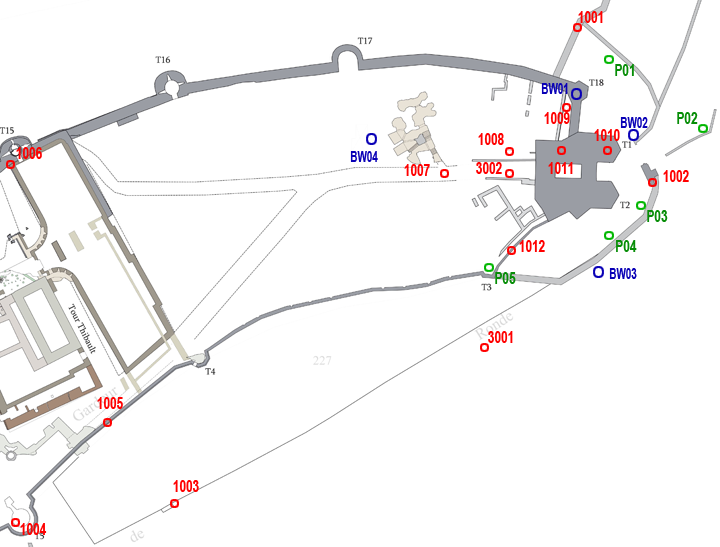
<style>
.page{position:relative;width:720px;height:547px;background:#ffffff}
.page>*{position:absolute;margin:0}
.t1{font:17.5px "Arial-BoldMT";color:#ff0000;scale:0.68 1}
.t2{font:17.5px "Arial-BoldMT";color:#068d06;scale:0.68 1}
.t3{font:14.6px "Arial-BoldMT";color:#0900b6;scale:0.68 1}
</style>
<div class="page">
<p class="t1" style="left:578px;top:11px;width:25px;height:12px">1001</p>
<p class="t2" style="left:615px;top:64px;width:19px;height:12px">P01</p>
<p class="t3" style="left:541px;top:83px;width:27px;height:11px">BW01</p>
<p class="t1" style="left:544px;top:112px;width:26px;height:12px">1009</p>
<p class="t2" style="left:677px;top:112px;width:21px;height:12px">P02</p>
<p class="t3" style="left:620px;top:117px;width:28px;height:11px">BW02</p>
<p class="t1" style="left:478px;top:133px;width:26px;height:12px">1008</p>
<p class="t1" style="left:594px;top:129px;width:26px;height:12px">1010</p>
<p class="t1" style="left:16px;top:147px;width:26px;height:12px">1006</p>
<p class="t3" style="left:350px;top:151px;width:28px;height:11px">BW04</p>
<p class="t1" style="left:404px;top:164px;width:26px;height:12px">1007</p>
<p class="t1" style="left:476px;top:162px;width:26px;height:12px">3002</p>
<p class="t1" style="left:548px;top:162px;width:25px;height:12px">1011</p>
<p class="t1" style="left:663px;top:170px;width:26px;height:12px">1002</p>
<p class="t2" style="left:647px;top:210px;width:21px;height:12px">P03</p>
<p class="t1" style="left:519px;top:240px;width:26px;height:12px">1012</p>
<p class="t2" style="left:616px;top:240px;width:21px;height:12px">P04</p>
<p class="t3" style="left:609px;top:268px;width:28px;height:11px">BW03</p>
<p class="t2" style="left:495px;top:272px;width:21px;height:12px">P05</p>
<p class="t1" style="left:488px;top:331px;width:25px;height:12px">3001</p>
<p class="t1" style="left:97px;top:397px;width:26px;height:12px">1005</p>
<p class="t1" style="left:173px;top:480px;width:26px;height:12px">1003</p>
<p class="t1" style="left:20px;top:523px;width:27px;height:12px">1004</p>
</div>
